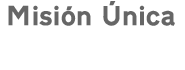
<style>
.page{position:relative;width:185px;height:70px;background:#ffffff}
.page>*{position:absolute;margin:0}
.t1{font:26px "Transport-Heavy-Regular";color:#666666}
</style>
<div class="page">
<p class="t1" style="left:8px;top:1px;width:167px;height:25px">Misión Única</p>
</div>
